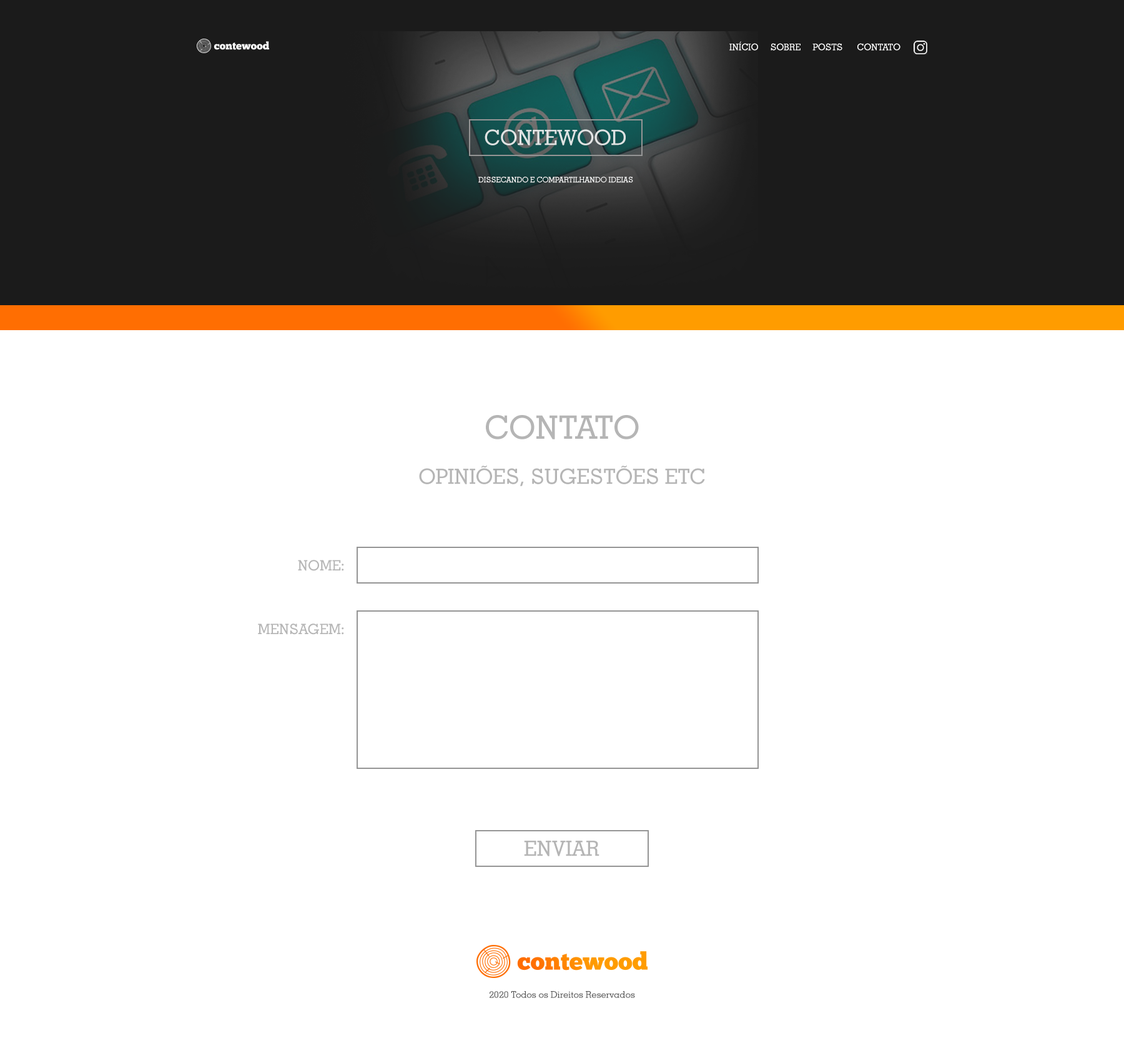
<style>
.page{position:relative;width:1124px;height:1061px;background:#ffffff}
.page>*{position:absolute;margin:0}
.t1{font:9.1px "GeometricSlab703BT-Medium";color:#ffffff}
.t2{font:21px "GeometricSlab703BT-Medium";color:#dee4e4}
.t3{font:7.5px "GeometricSlab703BT-Medium";color:#ffffff}
.t4{font:32.4px "GeometricSlab703BT-Medium";color:#a0a0a0}
.t5{font:21px "GeometricSlab703BT-Medium";color:#a0a0a0}
.t6{font:14.3px "GeometricSlab703BT-Medium";color:#a0a0a0}
.t7{font:9.3px "GeometricSlab703BT-Medium";color:#545454}
</style>
<div class="page">
<p class="t1" style="left:729px;top:41px;width:171px;height:10px">INÍCIO     SOBRE     POSTS      CONTATO</p>
<p class="t2" style="left:484px;top:129px;width:141px;height:16px">CONTEWOOD</p>
<p class="t3" style="left:478px;top:177px;width:155px;height:6px">DISSECANDO E COMPARTILHANDO IDEIAS</p>
<p class="t4" style="left:486px;top:415px;width:153px;height:24px;opacity:0.8">CONTATO</p>
<p class="t5" style="left:419px;top:466px;width:286px;height:20px;opacity:0.8">OPINIÕES, SUGESTÕES ETC</p>
<p class="t6" style="left:298px;top:560px;width:46px;height:11px;opacity:0.8">NOME:</p>
<p class="t6" style="left:258px;top:624px;width:86px;height:11px;opacity:0.8">MENSAGEM:</p>
<p class="t5" style="left:524px;top:841px;width:75px;height:15px;opacity:0.8">ENVIAR</p>
<p class="t7" style="left:489px;top:991px;width:146px;height:7px">2020 Todos os Direitos Reservados</p>
</div>
